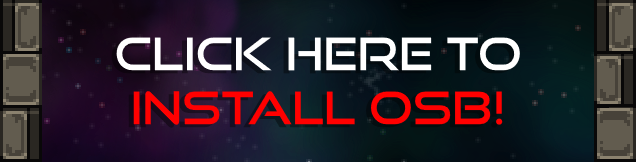
<style>
.page{position:relative;width:636px;height:162px}
.page>*{position:absolute;margin:0}
.t1{font:45px "GoodTimesRg-Regular";color:#ffffff}
.t2{font:45px "GoodTimesRg-Regular";color:#ff0000}
</style>
<div class="page">
<p class="t1" style="left:116px;top:37px;width:404px;height:88px;text-align:center">CLICK HERE To<br><span class="t2">INSTALL OSB!</span></p>
</div>
